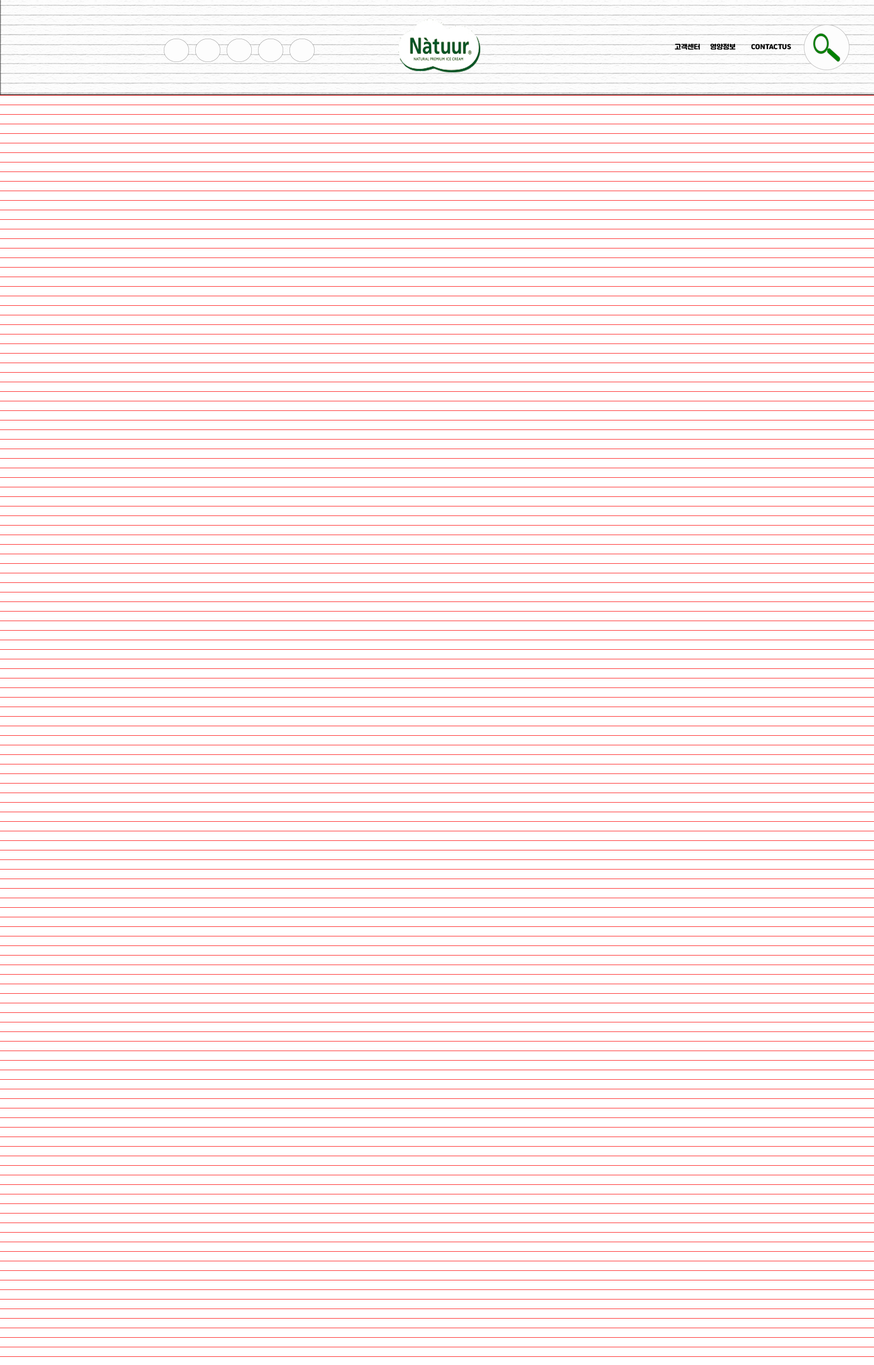
<style>
.page{position:relative;width:874px;height:1365px;background:#ffffff}
.page>*{position:absolute;margin:0}
.t1{font:10.9px "ygotjalnanfontOTF";color:#000000}
</style>
<div class="page">
<p class="t1" style="left:674px;top:44px;width:26px;height:6px">고객센터</p>
<p class="t1" style="left:710px;top:44px;width:25px;height:6px">영양정보</p>
<p class="t1" style="left:751px;top:44px;width:40px;height:6px">CONTACTUS</p>
</div>
